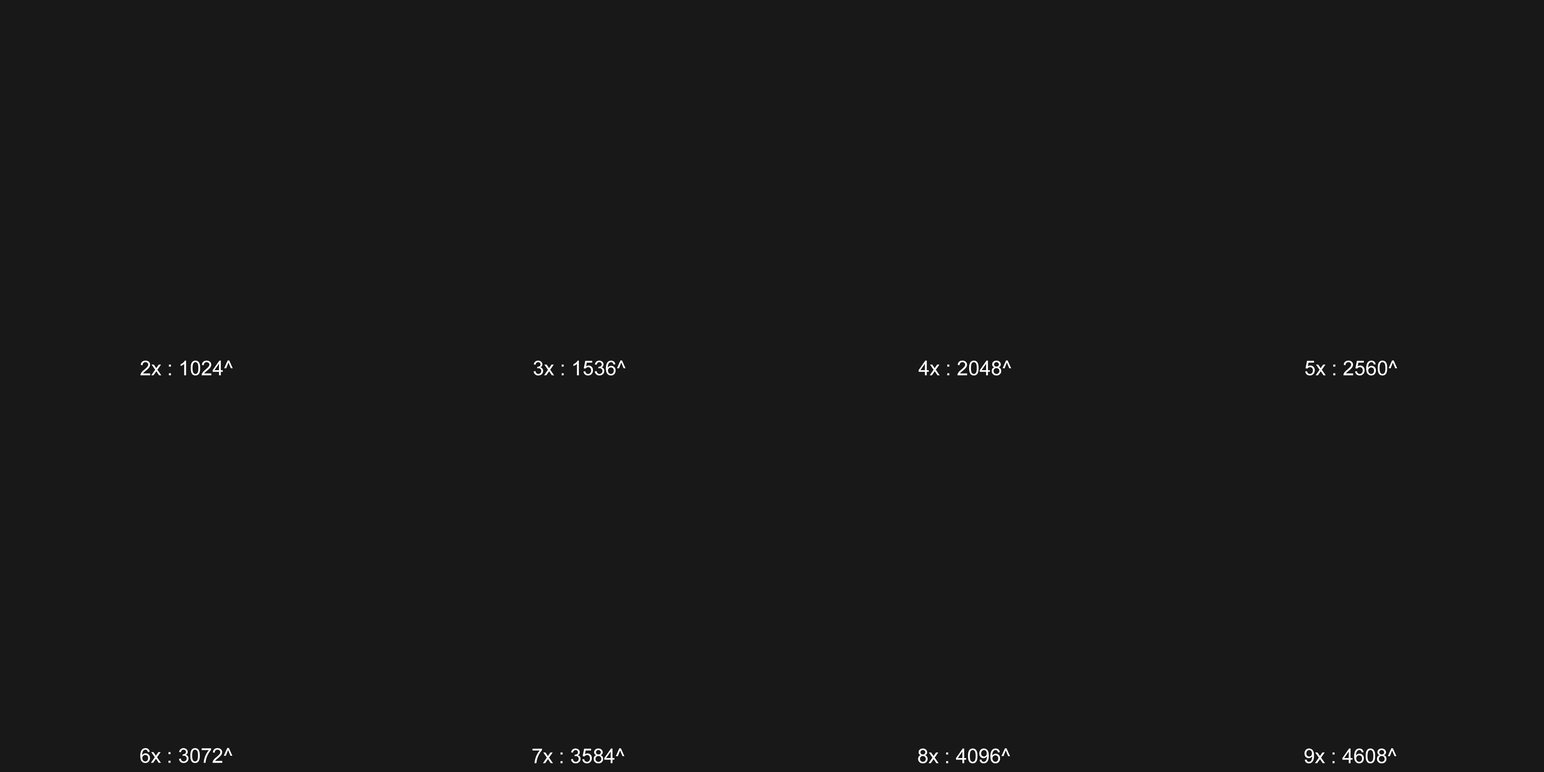
<style>
.page{position:relative;width:1544px;height:772px;background:#181818}
.page>*{position:absolute;margin:0}
.t1{font:20.4px "ArialMT";color:#ffffff}
</style>
<div class="page">
<p class="t1" style="left:140px;top:360px;width:93px;height:16px">2x : 1024^</p>
<p class="t1" style="left:533px;top:360px;width:93px;height:16px">3x : 1536^</p>
<p class="t1" style="left:919px;top:360px;width:93px;height:16px">4x : 2048^</p>
<p class="t1" style="left:1305px;top:360px;width:93px;height:16px">5x : 2560^</p>
<p class="t1" style="left:140px;top:748px;width:93px;height:15px">6x : 3072^</p>
<p class="t1" style="left:532px;top:748px;width:93px;height:15px">7x : 3584^</p>
<p class="t1" style="left:918px;top:748px;width:92px;height:15px">8x : 4096^</p>
<p class="t1" style="left:1305px;top:748px;width:92px;height:15px">9x : 4608^</p>
</div>
